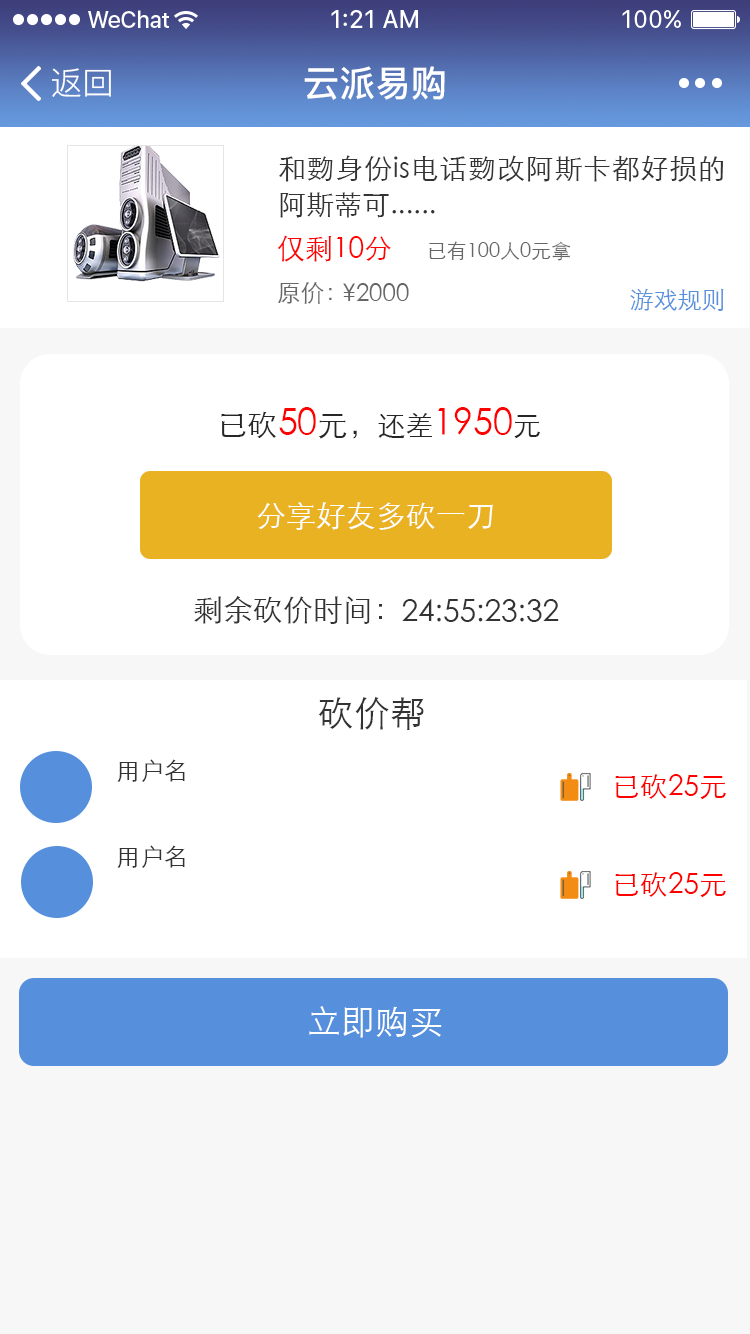
<style>
.page{position:relative;width:750px;height:1334px;background:#ffffff}
.page>*{position:absolute;margin:0}
.t1{font:32px "PingFang-SC-Regular";color:#ffffff}
.t2{font:36px "PingFang-SC-Bold";color:#ffffff}
.t3{font:28px/36px "STXihei";color:#333333}
.t4{font:28px "STXihei";color:#ff0101}
.t5{font:20px "STXihei";color:#666666}
.t6{font:24px "STXihei";color:#666666}
.t7{font:24px "STXihei";color:#568fdc}
.t8{font:36px "STXihei";color:#ff0000}
.t9{font:30px "STXihei";color:#262626}
.t10{font:28px "STXihei";color:#262626}
.t11{font:30px "STXihei";color:#ffffff}
.t12{font:30px "STXihei";color:#333333}
.t13{font:36px "STXihei";color:#333333}
.t14{font:24px "STXihei";color:#333333}
.t15{font:28px "STXihei";color:#fe0000}
.t16{font:34px "STXihei";color:#ffffff}
</style>
<div class="page">
<p class="t1" style="left:52px;top:68px;width:59px;height:29px">返回</p>
<p class="t2" style="left:304px;top:66px;width:141px;height:34px">云派易购</p>
<p class="t3" style="left:279px;top:155px;width:445px;height:63px;text-align:justify">和覅身份is电话覅改阿斯卡都好损的阿斯蒂可......</p>
<p class="t4" style="left:277px;top:235px;width:114px;height:27px">仅剩10分</p>
<p class="t5" style="left:429px;top:241px;width:142px;height:20px">已有100人0元拿</p>
<p class="t6" style="left:278px;top:282px;width:54px;height:22px">原价：</p>
<p class="t6" style="left:343px;top:283px;width:66px;height:18px">¥2000</p>
<p class="t7" style="left:630px;top:288px;width:94px;height:23px">游戏规则</p>
<p class="t8" style="left:221px;top:407px;width:319px;height:32px"><span class="t9">已砍</span>50<span class="t9">元，</span><span class="t10">还差</span>1950<span class="t10">元</span></p>
<p class="t11" style="left:257px;top:502px;width:236px;height:28px">分享好友多砍一刀</p>
<p class="t12" style="left:194px;top:596px;width:188px;height:28px">剩余砍价时间：</p>
<p class="t12" style="left:402px;top:599px;width:157px;height:23px">24:55:23:32</p>
<p class="t13" style="left:318px;top:696px;width:106px;height:34px">砍价帮</p>
<p class="t14" style="left:117px;top:759px;width:68px;height:23px">用户名</p>
<p class="t15" style="left:615px;top:774px;width:111px;height:26px">已砍25元</p>
<p class="t14" style="left:117px;top:845px;width:68px;height:23px">用户名</p>
<p class="t15" style="left:615px;top:872px;width:111px;height:26px">已砍25元</p>
<p class="t16" style="left:309px;top:1006px;width:133px;height:32px">立即购买</p>
</div>
